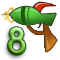
<style>
.page{position:relative;width:60px;height:60px;background:#ffffff}
.page>*{position:absolute;margin:0}
.t1{font:36.1px "BlippoLightSF";letter-spacing:0.07em;font-weight:bold}
</style>
<div class="page">
<p class="t1" style="left:8px;top:27px;width:18px;height:28px">8</p>
</div>
